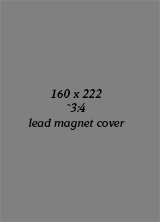
<style>
.page{position:relative;width:160px;height:222px;background:#808080}
.page>*{position:absolute;margin:0}
.t1{font:12.1px "Kandal-MediumItalic";color:#000000}
</style>
<div class="page">
<p class="t1" style="left:28px;top:89px;width:97px;height:41px;text-align:center">160 x 222<br>~3:4<br>lead magnet cover</p>
</div>
